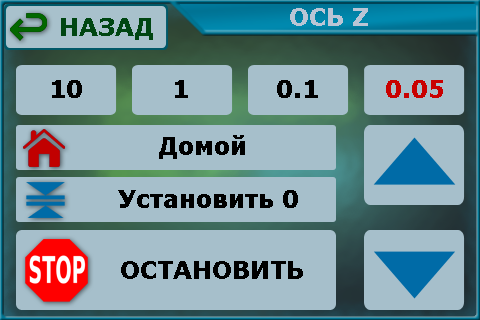
<style>
.page{position:relative;width:480px;height:320px;background:#a6bfcb}
.page>*{position:absolute;margin:0}
.t1{font:24px "Verdana-Bold";color:#bac5d5}
.t2{font:24px "Verdana-Bold";color:#004612}
.t3{font:24px "Verdana-Bold";color:#000000}
.t4{font:24px "Verdana-Bold";color:#c90000}
</style>
<div class="page">
<p class="t1" style="left:290px;top:8px;width:78px;height:18px">ОСЬ Z</p>
<p class="t2" style="left:61px;top:18px;width:92px;height:22px">НАЗАД</p>
<p class="t3" style="left:52px;top:80px;width:30px;height:18px">10</p>
<p class="t3" style="left:175px;top:80px;width:13px;height:18px">1</p>
<p class="t3" style="left:277px;top:80px;width:41px;height:18px">0.1</p>
<p class="t4" style="left:386px;top:80px;width:57px;height:18px">0.05</p>
<p class="t3" style="left:159px;top:135px;width:86px;height:24px">Домой</p>
<p class="t3" style="left:118px;top:190px;width:180px;height:18px">Установить 0</p>
<p class="t3" style="left:121px;top:261px;width:182px;height:18px">ОСТАНОВИТЬ</p>
</div>
